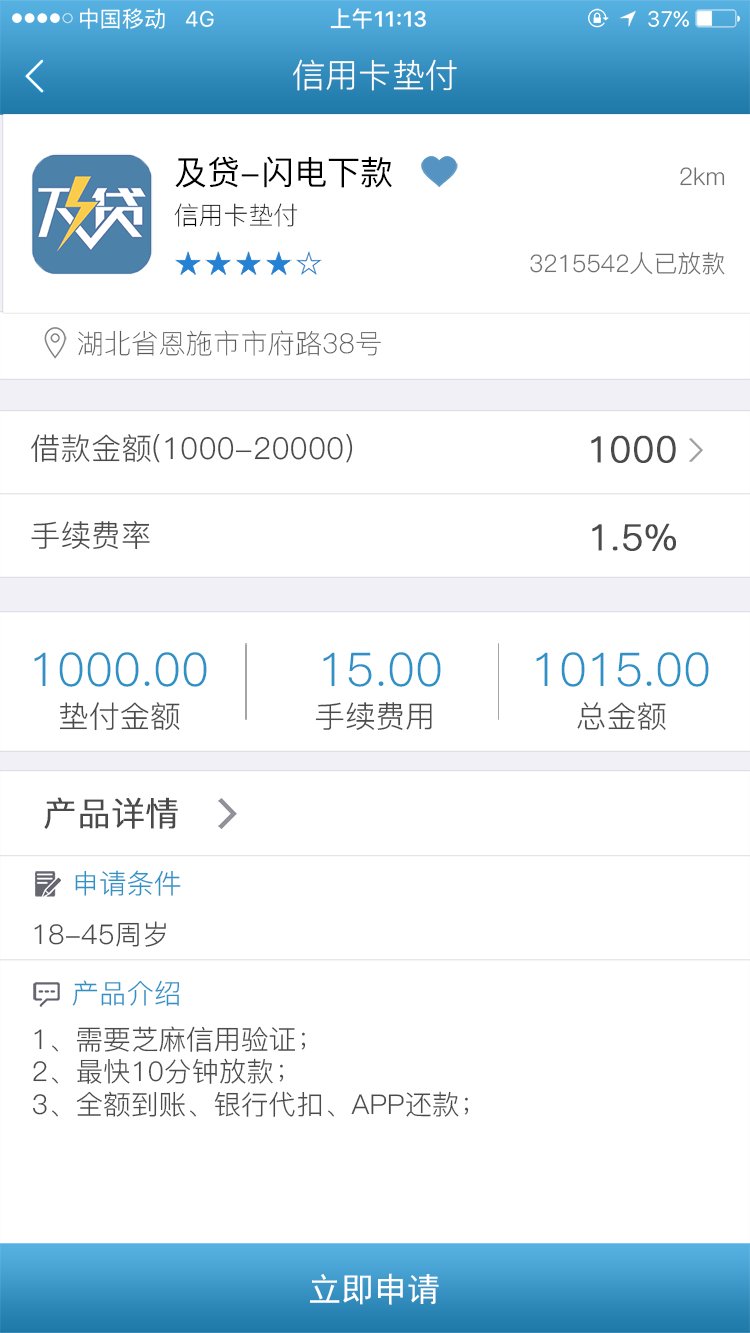
<style>
.page{position:relative;width:750px;height:1333px;background:#ffffff}
.page>*{position:absolute;margin:0}
.t1{font:33.3px "PingFang-SC-Regular";color:#ffffff}
.t2{font:33.2px "PingFang-SC-Medium";color:#000000}
.t3{font:24.1px "PingFang-SC-Regular";color:#6f6f6f}
.t4{font:25px "PingFang-SC-Light";color:#000000}
.t5{font:27.2px "PingFang-SC-Light";color:#575757}
.t6{font:30.2px "PingFang-SC-Regular";color:#4a4a4a}
.t7{font:36.2px "PingFang-SC-Regular";color:#4a4a4a;font-weight:bold}
.t8{font:46.4px "PingFang-SC-Regular";color:#2e92c7}
.t9{font:33.2px "PingFang-SC-Regular";color:#4a4a4a;font-weight:bold}
.t10{font:27.2px "PingFang-SC-Regular";color:#2e92c7}
.t11{font:27.2px "PingFang-SC-Regular";color:#4a4a4a}
.t12{font:33.3px "SimHei";color:#ffffff}
</style>
<div class="page">
<p class="t1" style="left:293px;top:59px;width:164px;height:32px">信用卡垫付</p>
<p class="t2" style="left:175px;top:156px;width:217px;height:32px">及贷-闪电下款</p>
<p class="t3" style="left:680px;top:167px;width:45px;height:19px">2km</p>
<p class="t4" style="left:174px;top:203px;width:124px;height:24px">信用卡垫付</p>
<p class="t3" style="left:530px;top:252px;width:195px;height:23px">3215542人已放款</p>
<p class="t5" style="left:78px;top:330px;width:303px;height:26px">湖北省恩施市市府路38号</p>
<p class="t6" style="left:31px;top:433px;width:322px;height:30px">借款金额(1000-20000)</p>
<p class="t7" style="left:591px;top:435px;width:85px;height:28px">1000</p>
<p class="t6" style="left:31px;top:521px;width:119px;height:29px">手续费率</p>
<p class="t7" style="left:592px;top:523px;width:84px;height:28px">1.5%</p>
<p class="t8" style="left:34px;top:652px;width:173px;height:35px">1000.00</p>
<p class="t8" style="left:323px;top:652px;width:118px;height:35px">15.00</p>
<p class="t8" style="left:536px;top:652px;width:173px;height:35px">1015.00</p>
<p class="t6" style="left:59px;top:702px;width:121px;height:29px">垫付金额</p>
<p class="t6" style="left:315px;top:702px;width:117px;height:28px">手续费用</p>
<p class="t6" style="left:577px;top:702px;width:89px;height:28px">总金额</p>
<p class="t9" style="left:44px;top:797px;width:134px;height:32px">产品详情</p>
<p class="t10" style="left:75px;top:870px;width:106px;height:26px">申请条件</p>
<p class="t11" style="left:34px;top:921px;width:132px;height:26px">18-45周岁</p>
<p class="t10" style="left:72px;top:980px;width:108px;height:26px">产品介绍</p>
<p class="t11" style="left:33px;top:1026px;width:436px;height:91px">1、需要芝麻信用验证；<br>2、最快10分钟放款；<br>3、全额到账、银行代扣、APP还款；</p>
<p class="t12" style="left:310px;top:1273px;width:129px;height:32px">立即申请</p>
</div>
